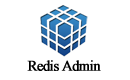
<style>
.page{position:relative;width:130px;height:80px;background:#ffffff}
.page>*{position:absolute;margin:0}
.t1{font:14.4px "TimesNewRomanPSMT";letter-spacing:-0.05em;color:#000000;font-weight:bold}
</style>
<div class="page">
<p class="t1" style="left:27px;top:60px;width:74px;height:11px">Redis Admin</p>
</div>
